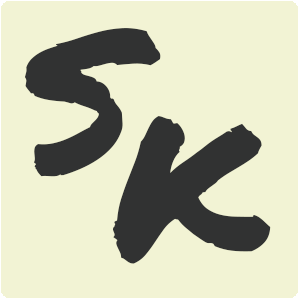
<style>
.page{position:relative;width:300px;height:300px;background:#f2f3d4}
.page>*{position:absolute;margin:0}
.t1{font:200px "PermanentMarker";color:#313232}
</style>
<div class="page">
<p class="t1" style="left:24px;top:28px;width:137px;height:149px">S</p>
<p class="t1" style="left:112px;top:116px;width:159px;height:148px">K</p>
</div>
